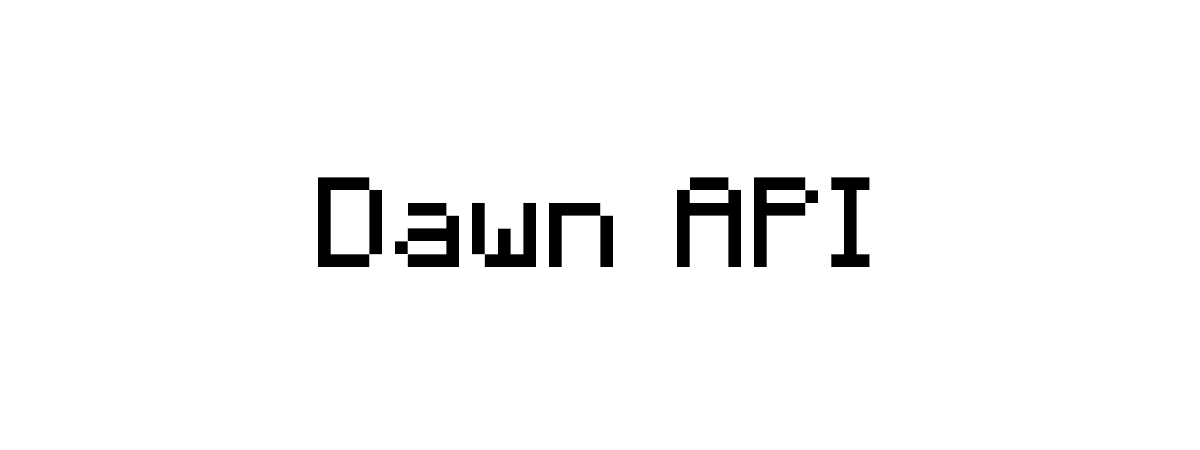
<style>
.page{position:relative;width:1200px;height:450px;background:#ffffff}
.page>*{position:absolute;margin:0}
.t1{font:128.1px "Minecraft-Regular";color:#000000}
</style>
<div class="page">
<p class="t1" style="left:318px;top:177px;width:552px;height:90px">Dawn API</p>
</div>
